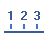
<style>
.page{position:relative;width:48px;height:48px;background:#ffffff}
.page>*{position:absolute;margin:0}
.t1{font:12px "MS Sans Serif";letter-spacing:-0.06em;color:#395c93;font-weight:bold}
</style>
<div class="page">
<p class="t1" style="left:8px;top:11px;width:32px;height:9px">1  2  3</p>
</div>
